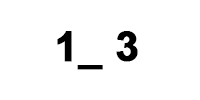
<style>
.page{position:relative;width:200px;height:100px;background:#ffffff}
.page>*{position:absolute;margin:0}
.t1{font:41.7px "Arial-BoldMT";color:#000000;font-weight:bold}
</style>
<div class="page">
<p class="t1" style="left:57px;top:31px;width:81px;height:39px">1_ 3</p>
</div>
